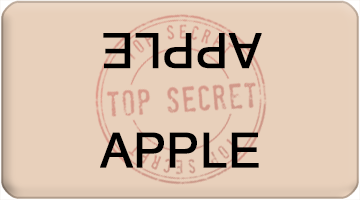
<style>
.page{position:relative;width:360px;height:200px;background:#e8d0bb}
.page>*{position:absolute;margin:0}
.t1{font:48px "ArialMT";color:#000000;font-weight:bold}
</style>
<div class="page">
<p class="t1" style="left:103px;top:33px;width:159px;height:36px;rotate:180deg">APPLE</p>
<p class="t1" style="left:100px;top:132px;width:159px;height:36px">APPLE</p>
</div>
